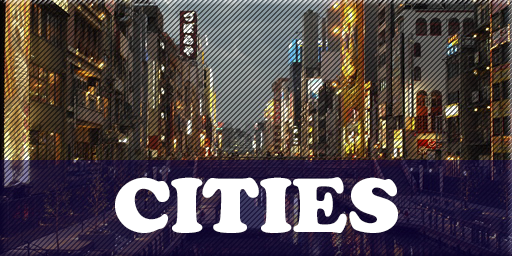
<style>
.page{position:relative;width:512px;height:256px}
.page>*{position:absolute;margin:0}
.t1{font:80px "CooperBlack";color:#ffffff}
</style>
<div class="page">
<p class="t1" style="left:115px;top:177px;width:283px;height:56px">CITIES</p>
</div>
